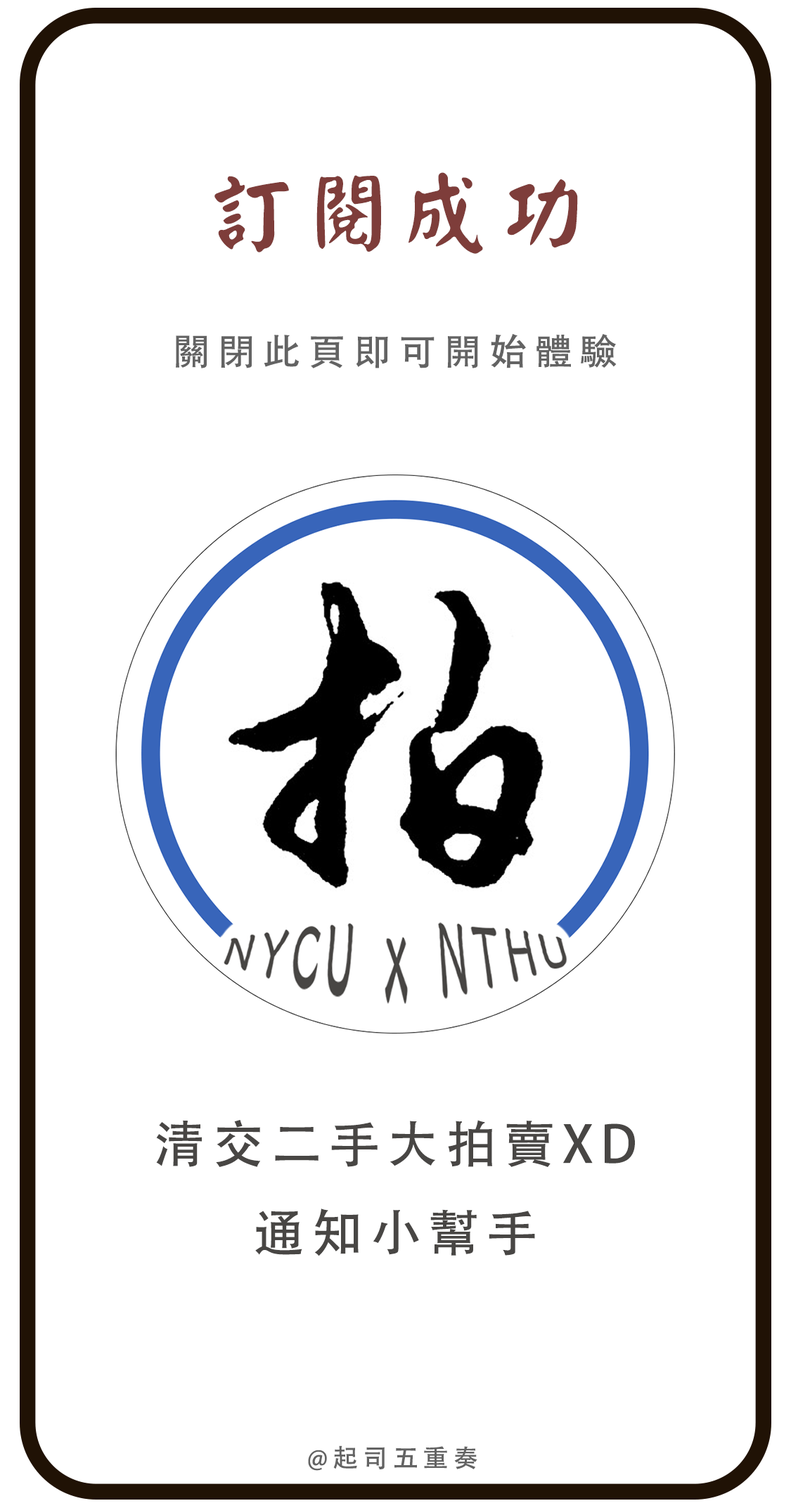
<style>
.page{position:relative;width:791px;height:1508px;background:#ffffff}
.page>*{position:absolute;margin:0}
.t1{font:89.3px "I.Ngaan";letter-spacing:0.08em;color:#7e3d3a;text-transform:uppercase}
.t2{font:36.8px "AdobeHeitiStd-Regular";letter-spacing:0.18em;color:#636363;text-transform:uppercase;scale:1.04 1}
.t3{font:50.6px "AdobeHeitiStd-Regular";letter-spacing:0.14em;color:#484644;text-transform:uppercase}
.t4{font:25.3px "AdobeHeitiStd-Regular";letter-spacing:0.18em;color:#636363;text-transform:uppercase}
</style>
<div class="page">
<p class="t1" style="left:214px;top:172px;width:364px;height:82px">訂閱成功</p>
<p class="t2" style="left:176px;top:334px;width:440px;height:34px">關閉此頁即可開始體驗</p>
<p class="t3" style="left:156px;top:1120px;width:479px;height:136px;text-align:center">清交二手大拍賣XD<br>通知小幫手</p>
<p class="t4" style="left:308px;top:1445px;width:169px;height:26px">@起司五重奏</p>
</div>
